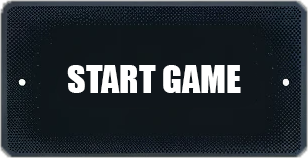
<style>
.page{position:relative;width:308px;height:158px;background:#10161b}
.page>*{position:absolute;margin:0}
.t1{font:36px "Impact";color:#ffffff}
</style>
<div class="page">
<p class="t1" style="left:67px;top:65px;width:174px;height:28px">START GAME</p>
</div>
